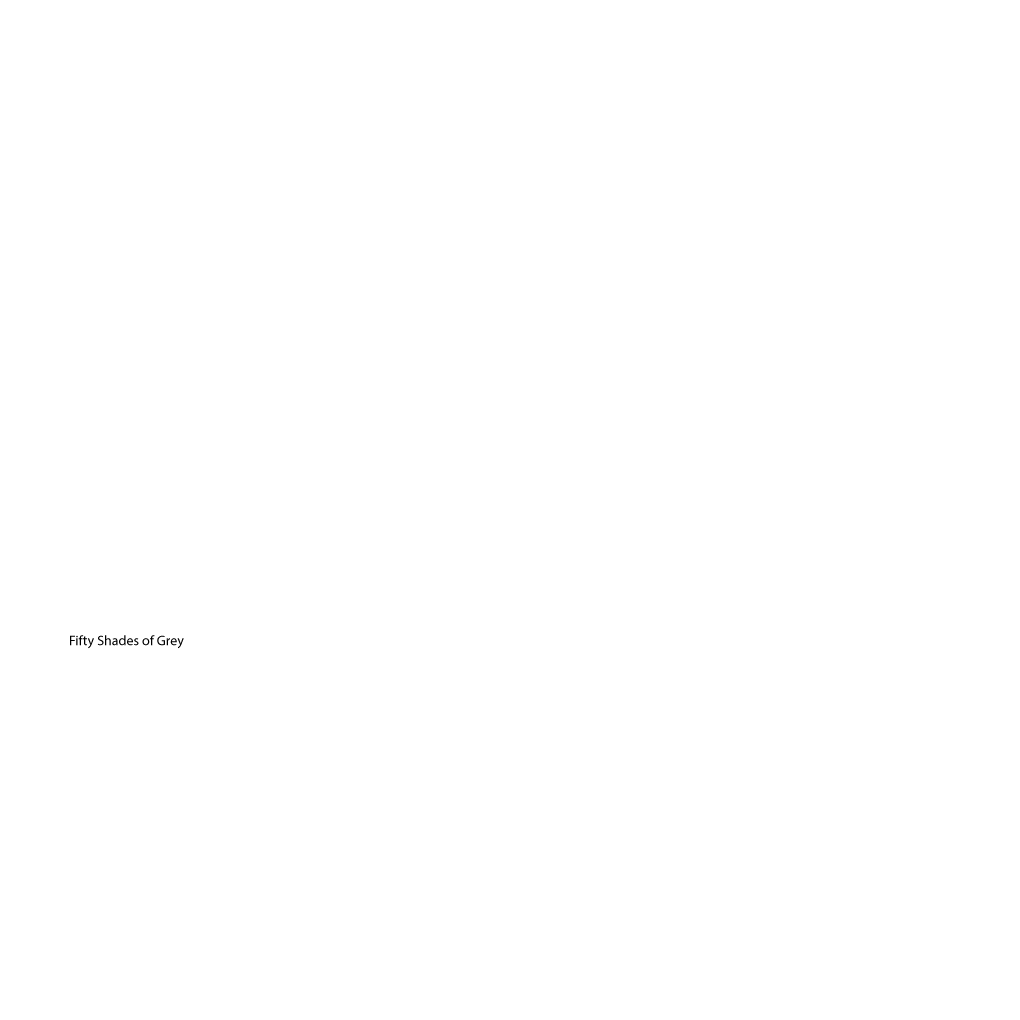
<style>
.page{position:relative;width:1020px;height:1020px;background:#ffffff}
.page>*{position:absolute;margin:0}
.t1{font:14px "MyriadPro-Regular";color:#000000}
</style>
<div class="page">
<p class="t1" style="left:70px;top:635px;width:114px;height:14px">Fifty Shades of Grey</p>
</div>
